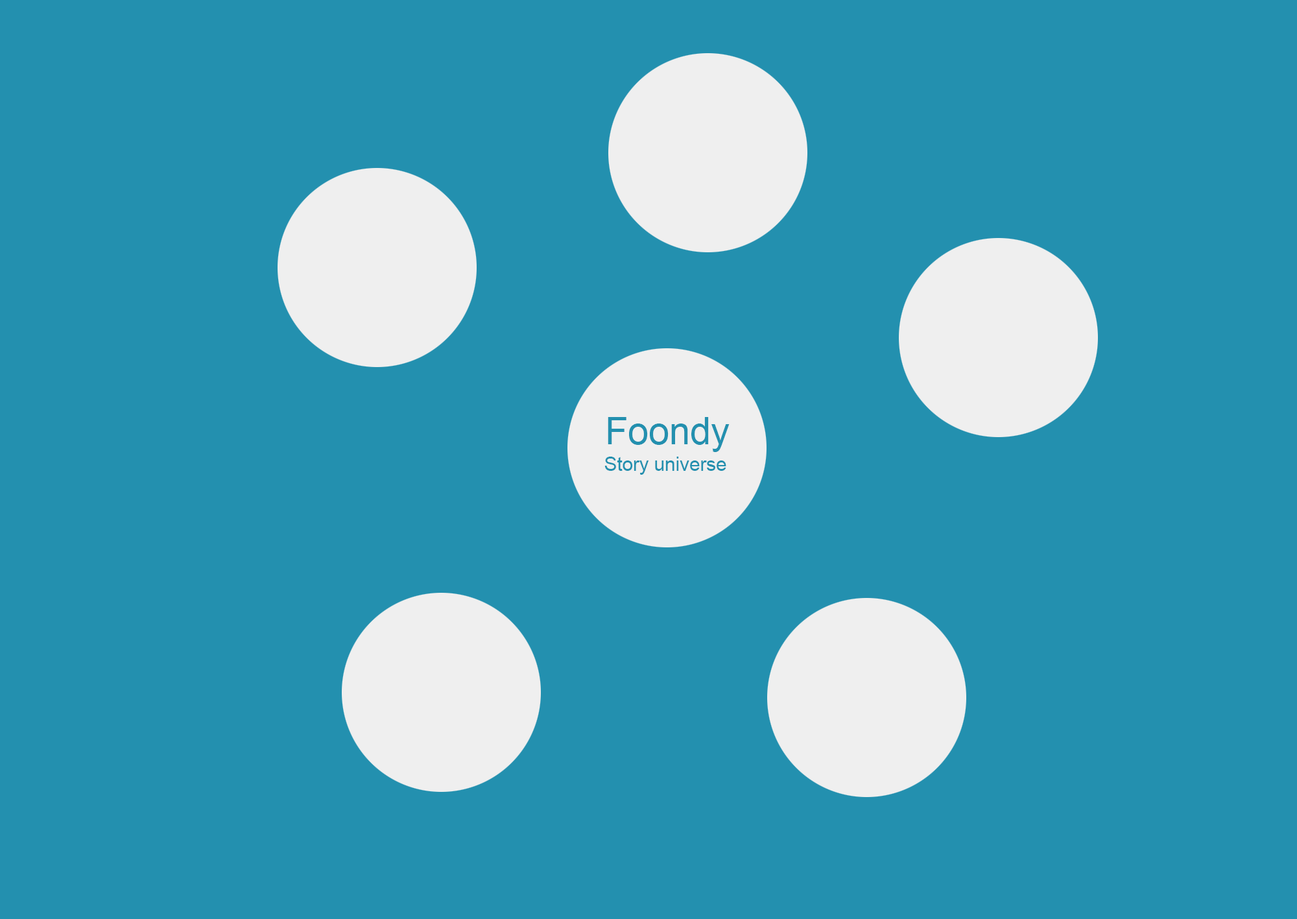
<style>
.page{position:relative;width:1297px;height:919px;background:#2390af}
.page>*{position:absolute;margin:0}
.t1{font:37.4px "ArialMT";color:#2390af}
.t2{font:19.1px "ArialMT";color:#2390af}
</style>
<div class="page">
<p class="t1" style="left:608px;top:417px;width:122px;height:35px">Foondy</p>
<p class="t2" style="left:605px;top:457px;width:121px;height:18px">Story universe</p>
</div>
